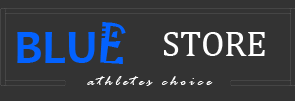
<style>
.page{position:relative;width:295px;height:101px;background:#333333}
.page>*{position:absolute;margin:0}
.t1{font:48px "Candara-Bold";color:#0362ff}
.t2{font:48px "Jokerman-Regular";color:#0362ff}
.t3{font:36px "Cambria";color:#ffffff}
.t4{font:16px "RageItalic";letter-spacing:0.2em;color:#ffffff}
</style>
<div class="page">
<p class="t1" style="left:17px;top:22px;width:109px;height:42px">BLU<span class="t2">E</span></p>
<p class="t3" style="left:164px;top:32px;width:101px;height:24px">STORE</p>
<p class="t4" style="left:87px;top:76px;width:126px;height:10px">athletes choice</p>
</div>
